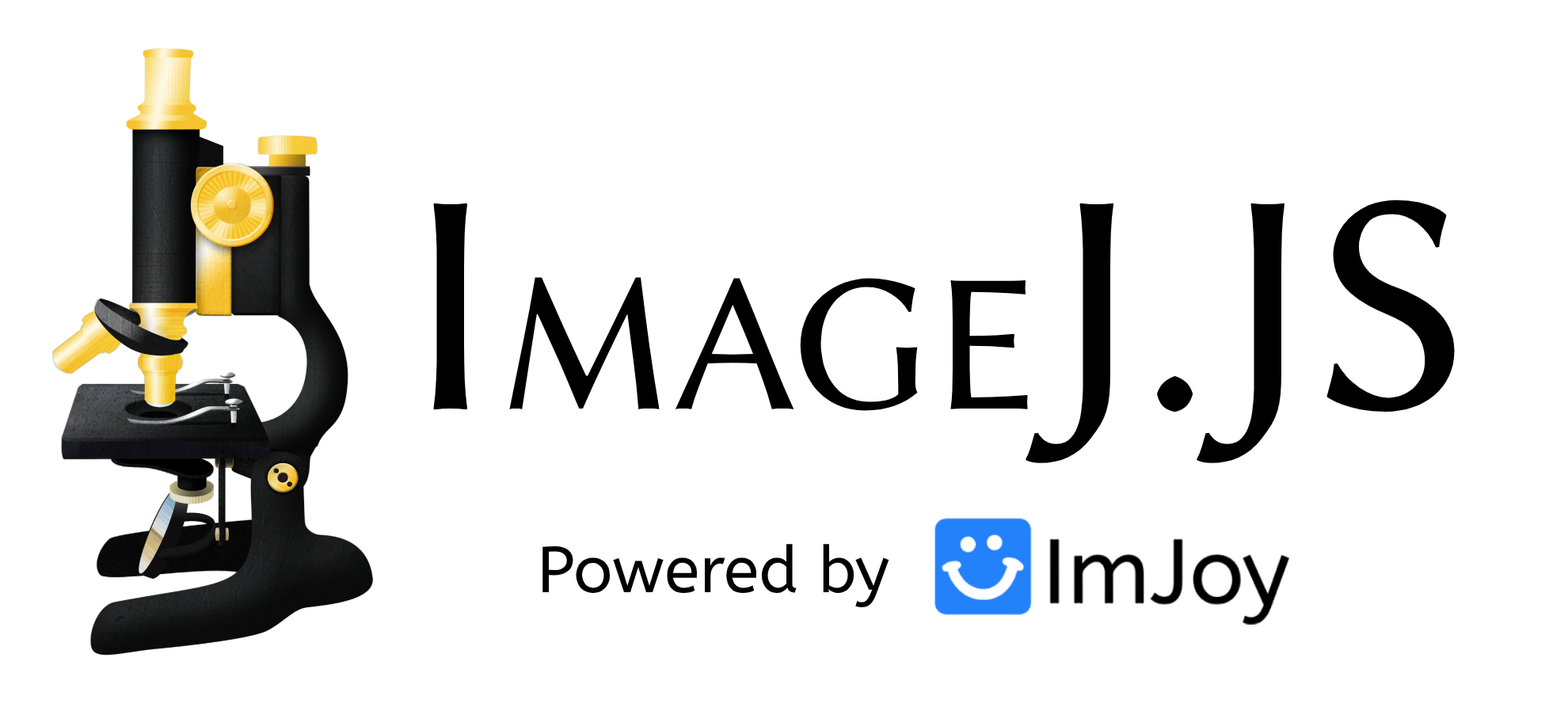
<style>
.page{position:relative;width:1568px;height:726px;background:#ffffff}
.page>*{position:absolute;margin:0}
.t1{font:198px "LinBiolinumO";color:#000000}
.t2{font:316.8px "LinBiolinumO";color:#000000}
.t3{font:64.9px "ABeeZee-Regular";color:#000000}
</style>
<div class="page">
<p class="t1" style="left:433px;top:200px;width:1022px;height:263px"><span class="t2">I</span>MAGE<span class="t2">J.JS</span></p>
<p class="t3" style="left:542px;top:544px;width:347px;height:64px">Powered by</p>
</div>
